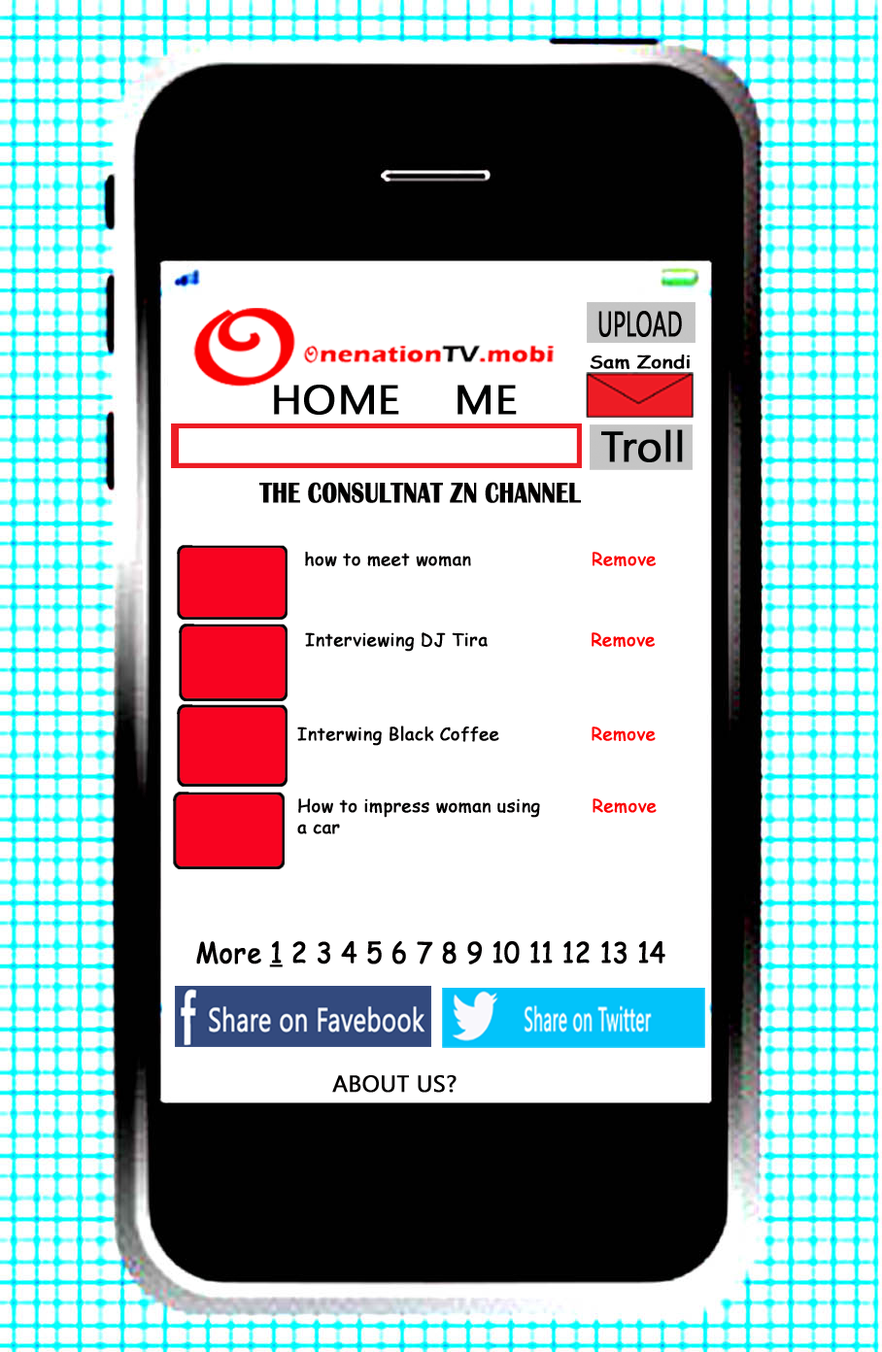
<style>
.page{position:relative;width:882px;height:1352px;background:#ffffff}
.page>*{position:absolute;margin:0}
.t1{font:35.5px "KhmerUI";color:#020000;font-weight:bold;scale:0.61 1}
.t2{font:17.6px "ComicSansMS";color:#020000;font-weight:bold;scale:1.13 1}
.t3{font:41px "KhmerUI";color:#000101;font-weight:bold;scale:1.07 1}
.t4{font:42.6px "KhmerUI";color:#000303;font-weight:bold}
.t5{font:29px "BritannicBold";color:#020000;font-weight:bold;scale:0.78 1}
.t6{font:17.6px "ComicSansMS";color:#020000;font-weight:bold}
.t7{font:17.6px "ComicSansMS";color:#fb0606;font-weight:bold}
.t8{font:17.6px "ComicSansMS";color:#fc0202;font-weight:bold}
.t9{font:17.6px "ComicSansMS";color:#ff0303;font-weight:bold}
.t10{font:17.6px "ComicSansMS";color:#fc0303;font-weight:bold}
.t11{font:28.3px "ComicSansMS";color:#020000;font-weight:bold;scale:0.92 1}
.t12{font:28.3px "ComicSansMS";color:#020000;font-weight:bold;text-decoration:underline;scale:0.92 1}
.t13{font:23.2px "KhmerUI";color:#020000;font-weight:bold}
</style>
<div class="page">
<p class="t1" style="left:598px;top:311px;width:84px;height:26px">UPLOAD</p>
<p class="t2" style="left:590px;top:355px;width:100px;height:14px">Sam Zondi</p>
<p class="t3" style="left:274px;top:385px;width:243px;height:30px">HOME    ME</p>
<p class="t4" style="left:601px;top:429px;width:82px;height:33px">Troll</p>
<p class="t5" style="left:259px;top:482px;width:322px;height:21px">THE CONSULTNAT ZN CHANNEL</p>
<p class="t6" style="left:305px;top:552px;width:351px;height:14px">how to meet woman                     <span class="t7">Remove</span></p>
<p class="t6" style="left:305px;top:632px;width:350px;height:20px">Interviewing DJ Tira                  <span class="t8">Remove</span></p>
<p class="t6" style="left:297px;top:726px;width:359px;height:20px">Interwing Black Coffee              <span class="t9">  Remove</span></p>
<p class="t6" style="left:297px;top:798px;width:360px;height:36px">How to impress woman using         <span class="t10">Remove<br></span>a car</p>
<p class="t11" style="left:196px;top:941px;width:469px;height:26px">More <span class="t12">1</span> 2 3 4 5 6 7 8 9 10 11 12 13 14</p>
<p class="t13" style="left:332px;top:1075px;width:125px;height:18px">ABOUT US?</p>
</div>
